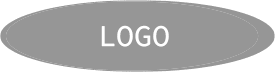
<style>
.page{position:relative;width:275px;height:72px;background:#969696}
.page>*{position:absolute;margin:0}
.t1{font:30px "SourceCodePro-Regular";color:#ffffff;text-transform:uppercase}
</style>
<div class="page">
<p class="t1" style="left:101px;top:25px;width:68px;height:22px">Logo</p>
</div>
